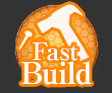
<style>
.page{position:relative;width:112px;height:93px;background:#333333}
.page>*{position:absolute;margin:0}
.t1{font:30px/24px "RyuminPro-ExBold";letter-spacing:-0.04em;color:#ffffff}
.t2{font:24px/24px "RyuminPro-ExBold";letter-spacing:-0.04em;color:#ffffff}
</style>
<div class="page">
<p class="t1" style="left:21px;top:42px;width:71px;height:43px;text-align:center"><span class="t2">Fast<br></span>Build</p>
</div>
